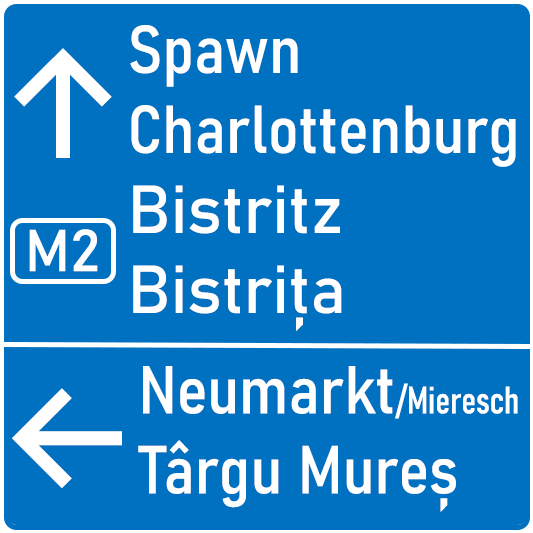
<style>
.page{position:relative;width:533px;height:533px;background:#0070c0}
.page>*{position:absolute;margin:0}
.t1{font:66.7px "Bahnschrift-SemiCondensed";color:#ffffff}
.t2{font:66.7px "Bahnschrift";color:#ffffff}
.t3{font:150px "Inter-Medium";color:#ffffff}
.t4{font:58.3px "Bahnschrift";color:#ffffff}
.t5{font:37.5px "Bahnschrift-SemiCondensed";color:#ffffff}
.t6{font:37.5px "Bahnschrift-Condensed";color:#ffffff}
</style>
<div class="page">
<p class="t1" style="left:130px;top:25px;width:386px;height:306px">Spawn<br>Charlottenburg<br><span class="t2">Bistritz<br>Bistrița</span></p>
<p class="t3" style="left:14px;top:48px;width:98px;height:110px">↑</p>
<p class="t4" style="left:29px;top:229px;width:69px;height:43px">M2</p>
<p class="t1" style="left:138px;top:366px;width:380px;height:146px">Neumarkt<span class="t5">/</span><span class="t6">Mieresch</span><br>Târgu Mureș</p>
<p class="t3" style="left:12px;top:388px;width:110px;height:100px">←</p>
</div>
